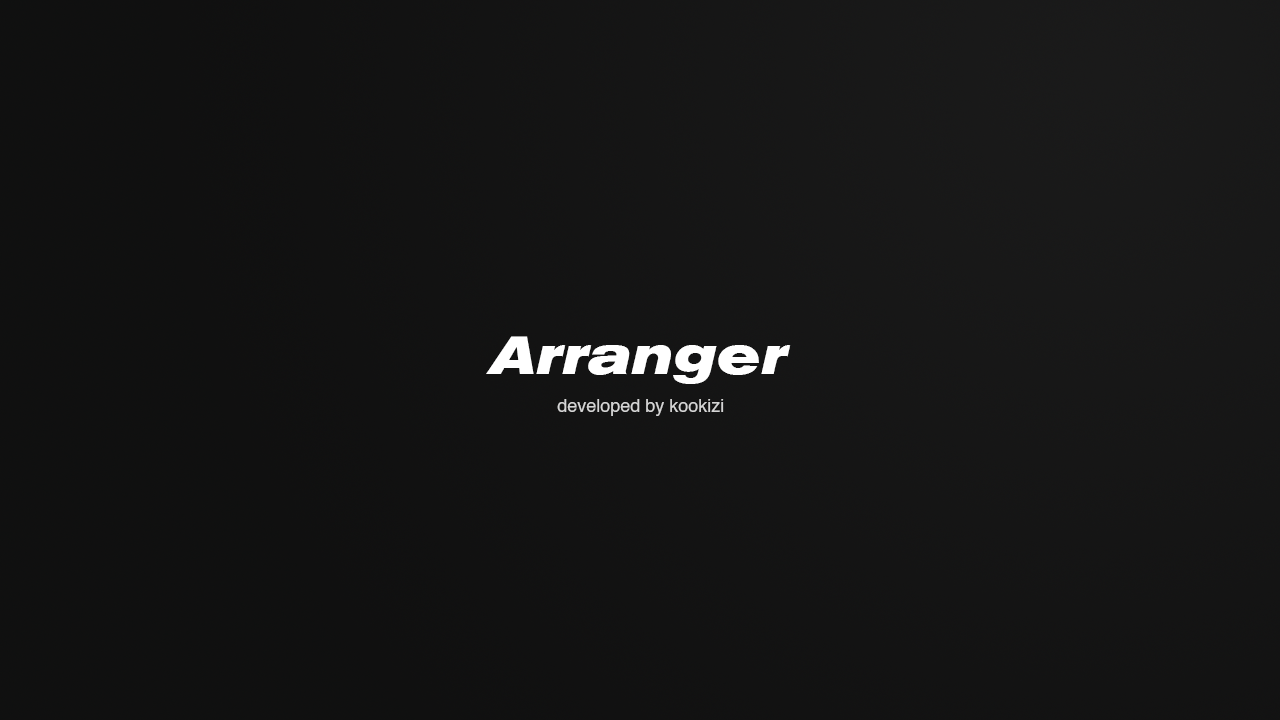
<style>
.page{position:relative;width:1280px;height:720px}
.page>*{position:absolute;margin:0}
.t1{font:53px "AkzidenzGroteskBQ-BoldExtIt";color:#ffffff}
.t2{font:18px "Helvetica";color:#d5d5d5}
</style>
<div class="page">
<p class="t1" style="left:486px;top:336px;width:305px;height:48px">Arranger</p>
<p class="t2" style="left:557px;top:399px;width:167px;height:17px">developed by kookizi</p>
</div>
